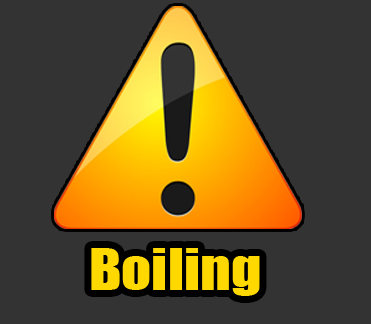
<style>
.page{position:relative;width:371px;height:324px;background:#333333}
.page>*{position:absolute;margin:0}
.t1{font:53px "Impact";color:#ffd800;scale:1.11 1}
</style>
<div class="page">
<p class="t1" style="left:91px;top:248px;width:169px;height:48px">Boiling</p>
</div>
